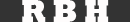
<style>
.page{position:relative;width:130px;height:22px;background:#333333}
.page>*{position:absolute;margin:0}
.t1{font:32.3px "Rockwell-ExtraBold";color:#fefcfc;scale:0.89 1}
</style>
<div class="page">
<p class="t1" style="left:22px;top:0px;width:87px;height:22px">R B H</p>
</div>
